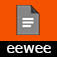
<style>
.page{position:relative;width:57px;height:57px;background:#f55200}
.page>*{position:absolute;margin:0}
.t1{font:14px "Verdana";color:#ffffff}
</style>
<div class="page">
<p class="t1" style="left:7px;top:45px;width:44px;height:8px">eewee</p>
</div>
